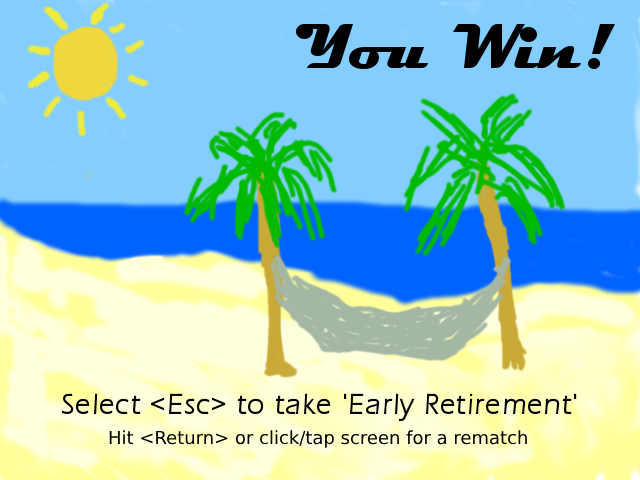
<style>
.page{position:relative;width:640px;height:480px;background:#84ceff}
.page>*{position:absolute;margin:0}
.t1{font:267px "Magneto-BoldSemi-Expanded";color:#000000}
.t2{font:117px "Eras-LightITC";color:#000000}
.t3{font:18px "Eras-LightITC";color:#000000}
</style>
<div class="page">
<p class="t1" style="left:296px;top:17px;width:319px;height:64px">You Win!</p>
<p class="t2" style="left:61px;top:389px;width:518px;height:32px">Select &lt;Esc&gt; to take 'Early Retirement'</p>
<p class="t3" style="left:109px;top:430px;width:418px;height:18px">Hit &lt;Return&gt; or click/tap screen for a rematch</p>
</div>
